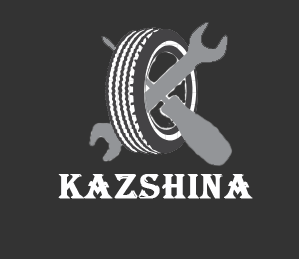
<style>
.page{position:relative;width:299px;height:259px;background:#333333}
.page>*{position:absolute;margin:0}
.t1{font:36px "Algerian";letter-spacing:0.04em;color:#fefeff;font-weight:bold}
</style>
<div class="page">
<p class="t1" style="left:58px;top:174px;width:195px;height:25px">KazShina</p>
</div>
